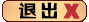
<style>
.page{position:relative;width:89px;height:22px}
.page>*{position:absolute;margin:0}
.t1{font:22px "HYQuHeiW";color:#000000}
</style>
<div class="page">
<p class="t1" style="left:18px;top:2px;width:39px;height:17px">退出</p>
</div>
